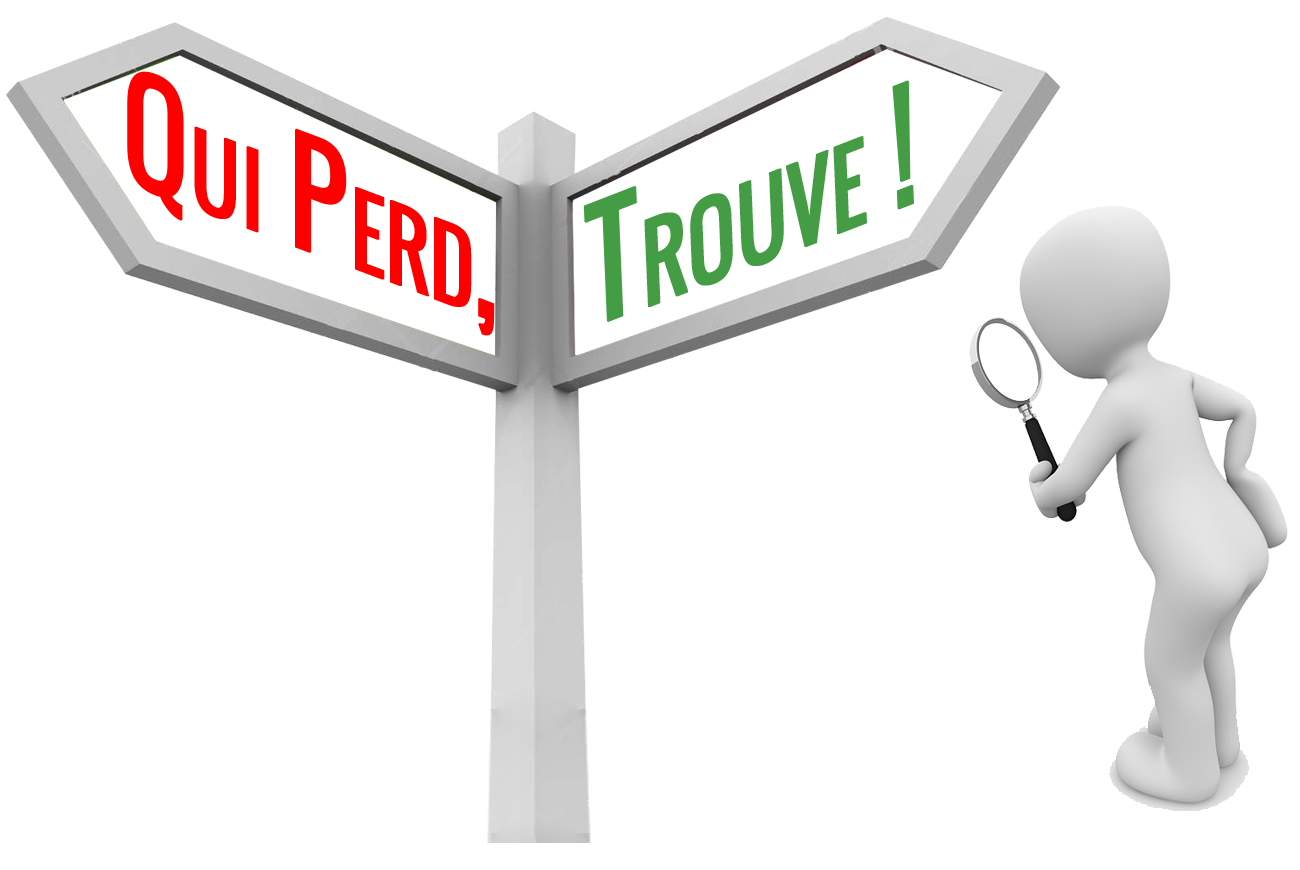
<style>
.page{position:relative;width:1300px;height:870px;background:#ffffff}
.page>*{position:absolute;margin:0}
.t1{font:133.6px "Oswald-Regular";color:#ff0000;font-variant:small-caps;font-weight:bold;scale:0.9 1}
.t2{font:139.1px "Oswald-Regular";color:#449d44;font-variant:small-caps;font-weight:bold;scale:0.89 1}
</style>
<div class="page">
<p class="t1" style="left:127px;top:71px;width:368px;height:265px;rotate:21deg">Qui Perd,</p>
<p class="t2" style="left:583px;top:80px;width:331px;height:242px;rotate:-21deg">Trouve !</p>
</div>
